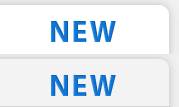
<style>
.page{position:relative;width:179px;height:107px;background:#ffffff}
.page>*{position:absolute;margin:0}
.t1{font:30px "MyriadPro-Bold";letter-spacing:0.06em;color:#0d75d7}
</style>
<div class="page">
<p class="t1" style="left:51px;top:21px;width:65px;height:21px">NEW</p>
<p class="t1" style="left:51px;top:75px;width:65px;height:21px">NEW</p>
</div>
